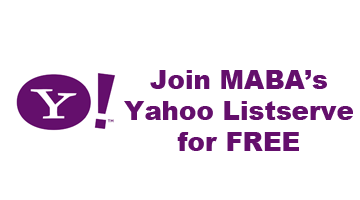
<style>
.page{position:relative;width:360px;height:200px;background:#ffffff}
.page>*{position:absolute;margin:0}
.t1{font:26px "Arial-Black";color:#640f6c}
</style>
<div class="page">
<p class="t1" style="left:124px;top:70px;width:229px;height:81px;text-align:center">Join MABA’s Yahoo Listserve for FREE</p>
</div>
